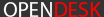
<style>
.page{position:relative;width:104px;height:17px;background:#333333}
.page>*{position:absolute;margin:0}
.t1{font:21px "MyriadPro-Regular";letter-spacing:0.01em;color:#ffffff}
.t2{font:21px "MyriadPro-Regular";letter-spacing:0.01em;color:#ff0000}
</style>
<div class="page">
<p class="t1" style="left:3px;top:2px;width:98px;height:15px">OPEN<span class="t2">DESK</span></p>
</div>
